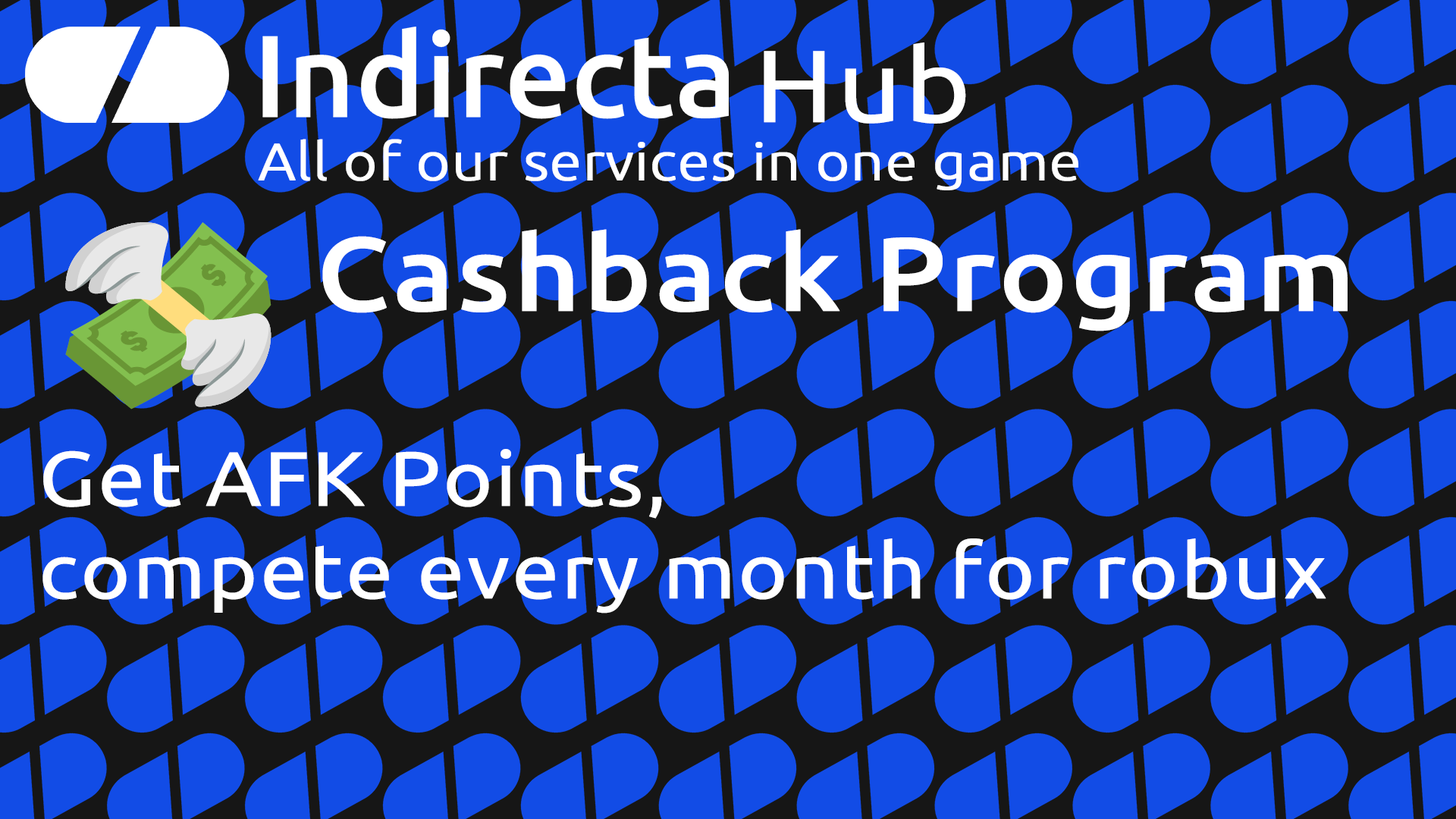
<style>
.page{position:relative;width:1456px;height:819px;background:#124ce6}
.page>*{position:absolute;margin:0}
.t1{font:102.4px "Ubuntu-Regular";color:#ffffff;font-weight:bold;scale:1.1 1}
.t2{font:52.3px "Ubuntu-Light";color:#ffffff;font-weight:bold;scale:1.1 1}
.t3{font:104.8px "Ubuntu-Medium";color:#ffffff;font-weight:bold;scale:1.1 1}
.t4{font:77px "Ubuntu-Regular";color:#ffffff;font-weight:bold;scale:1.1 1}
</style>
<div class="page">
<p class="t1" style="left:764px;top:42px;width:202px;height:82px">Hub</p>
<p class="t2" style="left:258px;top:139px;width:820px;height:51px">All of our services in one game</p>
<p class="t3" style="left:322px;top:229px;width:1026px;height:102px">Cashback Program</p>
<p class="t4" style="left:42px;top:449px;width:1284px;height:164px">Get AFK Points, <br>compete every month for robux</p>
</div>
